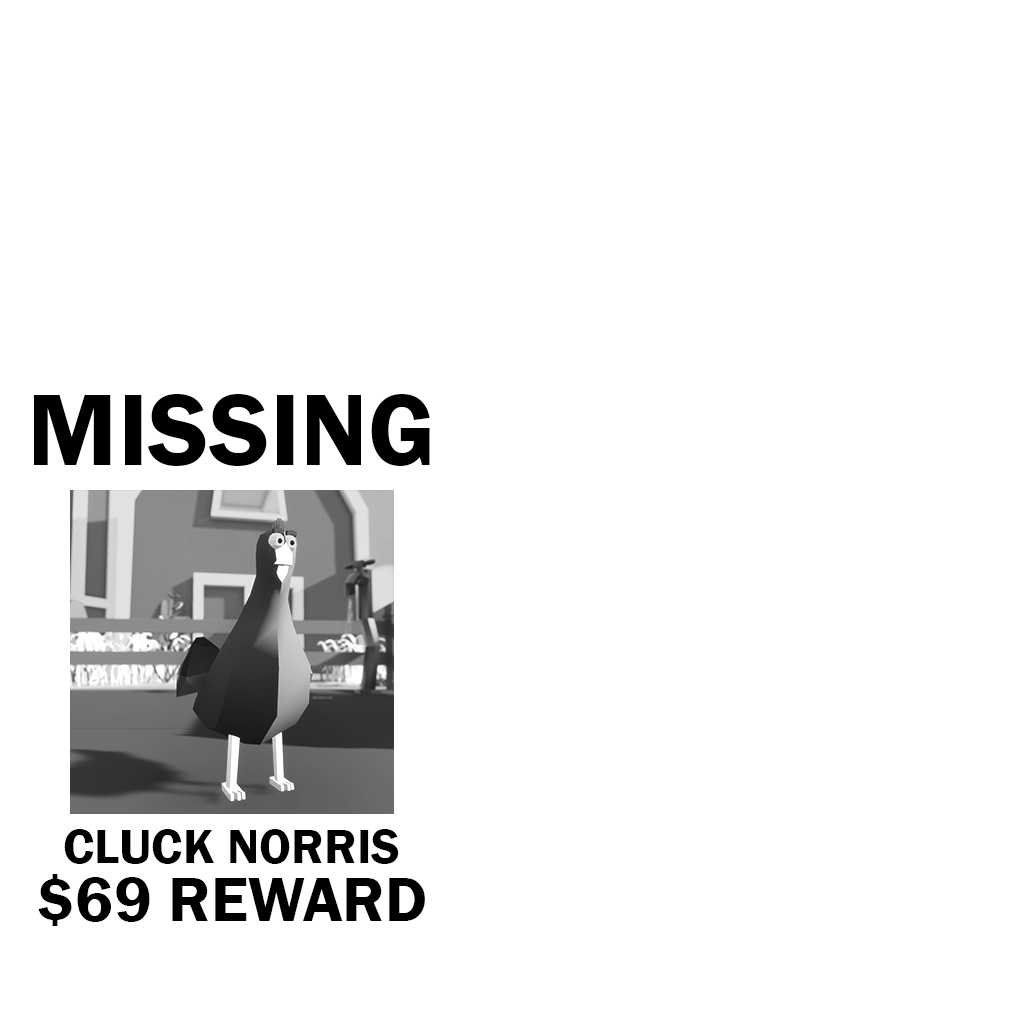
<style>
.page{position:relative;width:1024px;height:1024px;background:#ffffff}
.page>*{position:absolute;margin:0}
.t1{font:105px "FranklinGothic-Demi";color:#000000}
.t2{font:50px "FranklinGothic-Demi";color:#000000}
.t3{font:65px "FranklinGothic-Demi";color:#000000}
</style>
<div class="page">
<p class="t1" style="left:33px;top:394px;width:397px;height:72px">MISSING</p>
<p class="t2" style="left:64px;top:829px;width:335px;height:35px">CLUCK NORRIS</p>
<p class="t3" style="left:38px;top:874px;width:387px;height:52px">$69 REWARD</p>
</div>
